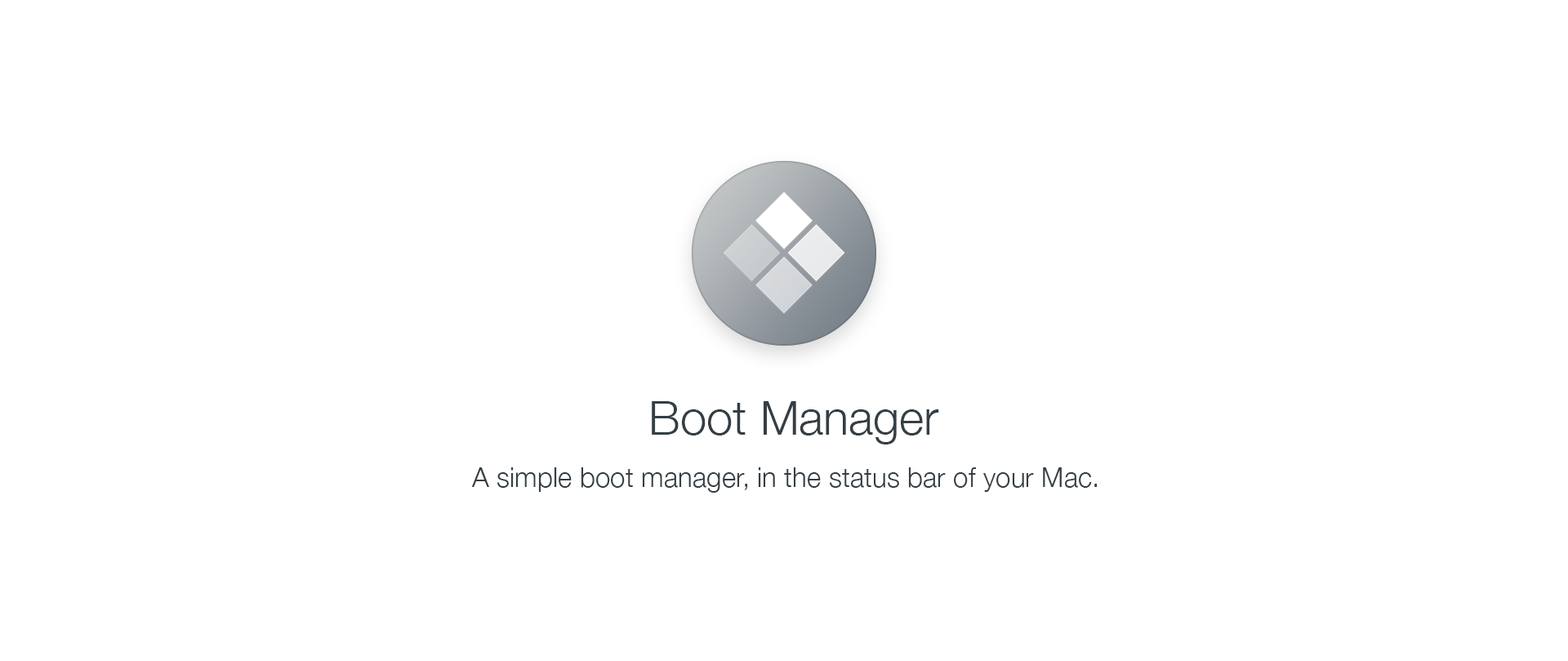
<style>
.page{position:relative;width:1568px;height:661px;background:#ffffff}
.page>*{position:absolute;margin:0}
.t1{font:47.3px "HelveticaNeue-Light";color:#343e44}
.t2{font:27.2px "HelveticaNeue-Light";color:#343e44}
</style>
<div class="page">
<p class="t1" style="left:652px;top:401px;width:287px;height:43px">Boot Manager</p>
<p class="t2" style="left:471px;top:467px;width:627px;height:25px">A simple boot manager, in the status bar of your Mac.</p>
</div>
